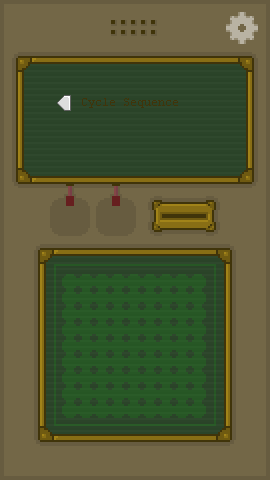
<style>
.page{position:relative;width:270px;height:480px;background:#736747}
.page>*{position:absolute;margin:0}
.t1{font:12px "CourierNewPSMT";color:#40340a}
</style>
<div class="page">
<p class="t1" style="left:82px;top:98px;width:96px;height:10px">Cycle Sequence</p>
</div>
